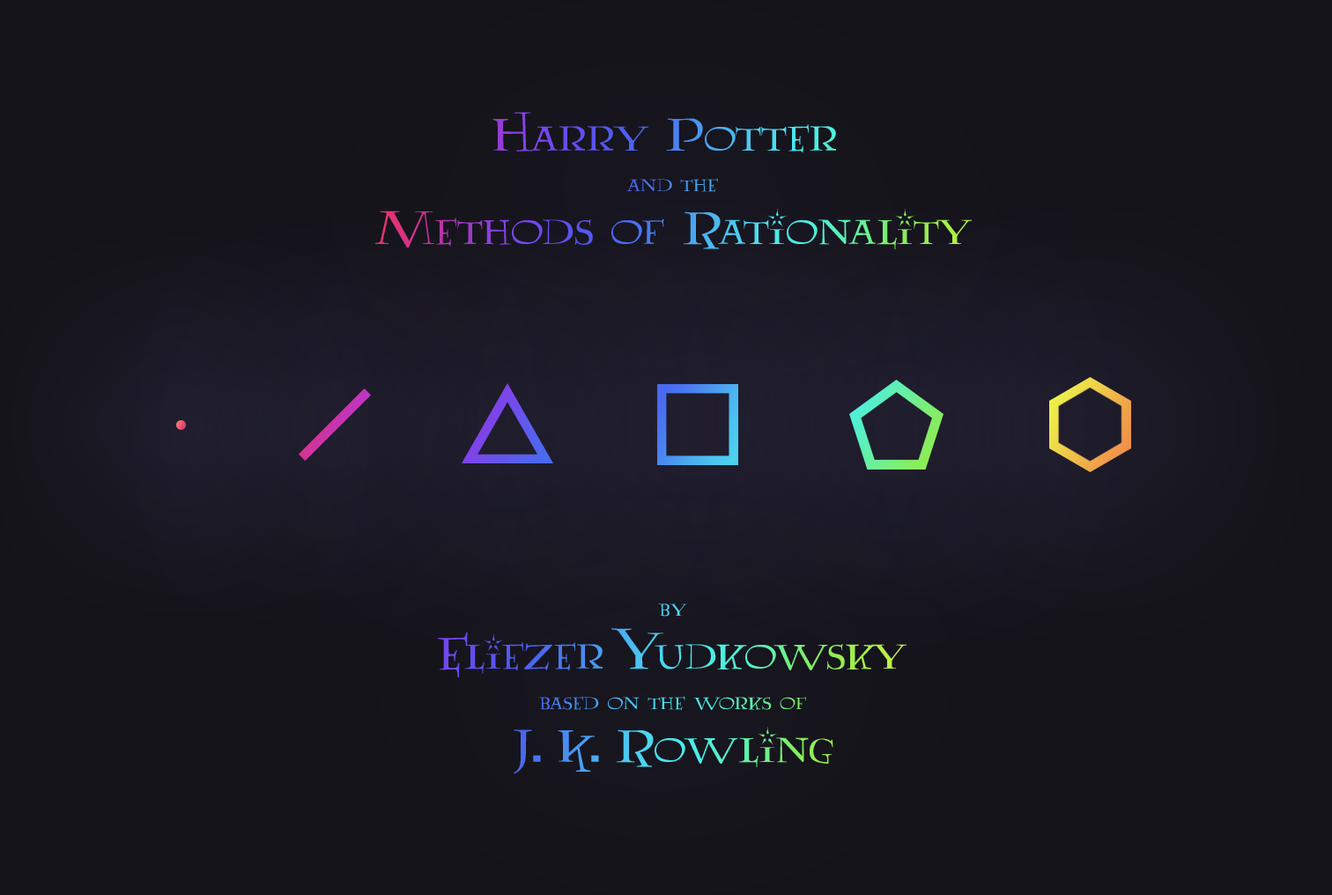
<style>
.page{position:relative;width:1332px;height:895px;background:#141319}
.page>*{position:absolute;margin:0}
.t1{font:53.2px/53.2px "Lumos"}
.t2{font:26.1px/40.2px "Lumos"}
.t3{font:26.1px/730px "Lumos"}
</style>
<div class="page">
<p class="t1" style="left:374px;top:112px;width:599px;height:137px;text-align:center">Harry Potter <br><span class="t2">and the<br></span>Methods of Rationality</p>
<p class="t2" style="left:437px;top:604px;width:470px;height:170px;text-align:center"><span class="t3">by<br></span><span class="t1">Eliezer Yudkowsky<br></span>based on the works of<br><span class="t1">J. K. Rowling</span></p>
</div>
